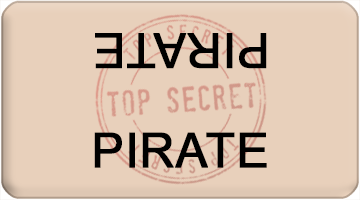
<style>
.page{position:relative;width:360px;height:200px;background:#e8d0bb}
.page>*{position:absolute;margin:0}
.t1{font:48px "ArialMT";color:#000000;font-weight:bold}
</style>
<div class="page">
<p class="t1" style="left:95px;top:33px;width:172px;height:36px;rotate:180deg">PIRATE</p>
<p class="t1" style="left:94px;top:132px;width:173px;height:36px">PIRATE</p>
</div>
